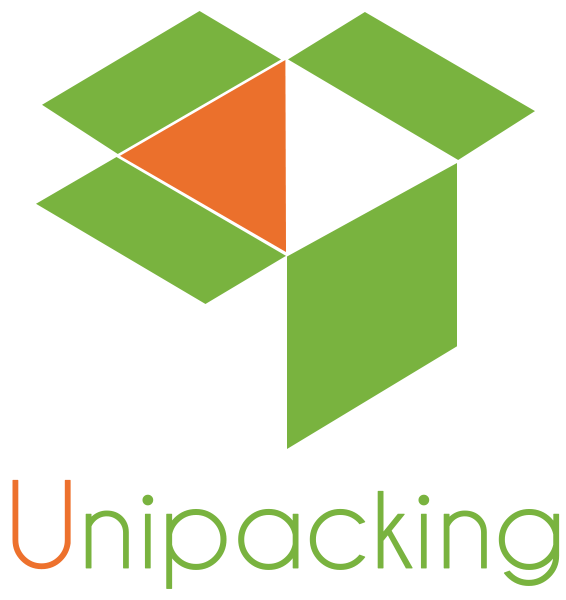
<style>
.page{position:relative;width:566px;height:600px;background:#ffffff}
.page>*{position:absolute;margin:0}
.t1{font:126.8px "Champagne&Limousines";color:#ed712d;font-weight:bold}
.t2{font:126.8px "Champagne&Limousines";color:#79b33f;font-weight:bold}
</style>
<div class="page">
<p class="t1" style="left:12px;top:479px;width:59px;height:91px">U</p>
<p class="t2" style="left:85px;top:490px;width:475px;height:99px">nipacking</p>
</div>
